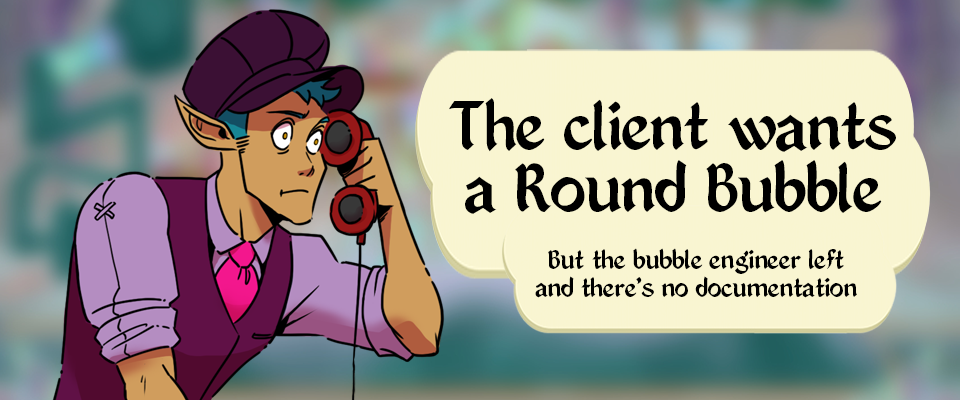
<style>
.page{position:relative;width:960px;height:400px}
.page>*{position:absolute;margin:0}
.t1{font:75px/61.8px "Enchant-Regular";color:#000000}
.t2{font:29.7px/27.8px "Enchant-Regular";color:#000000}
</style>
<div class="page">
<p class="t1" style="left:449px;top:98px;width:447px;height:116px;text-align:center">The client wants<br>a Round Bubble</p>
<p class="t2" style="left:535px;top:248px;width:322px;height:50px;text-align:center">But the bubble engineer left<br>and there’s no documentation</p>
</div>
